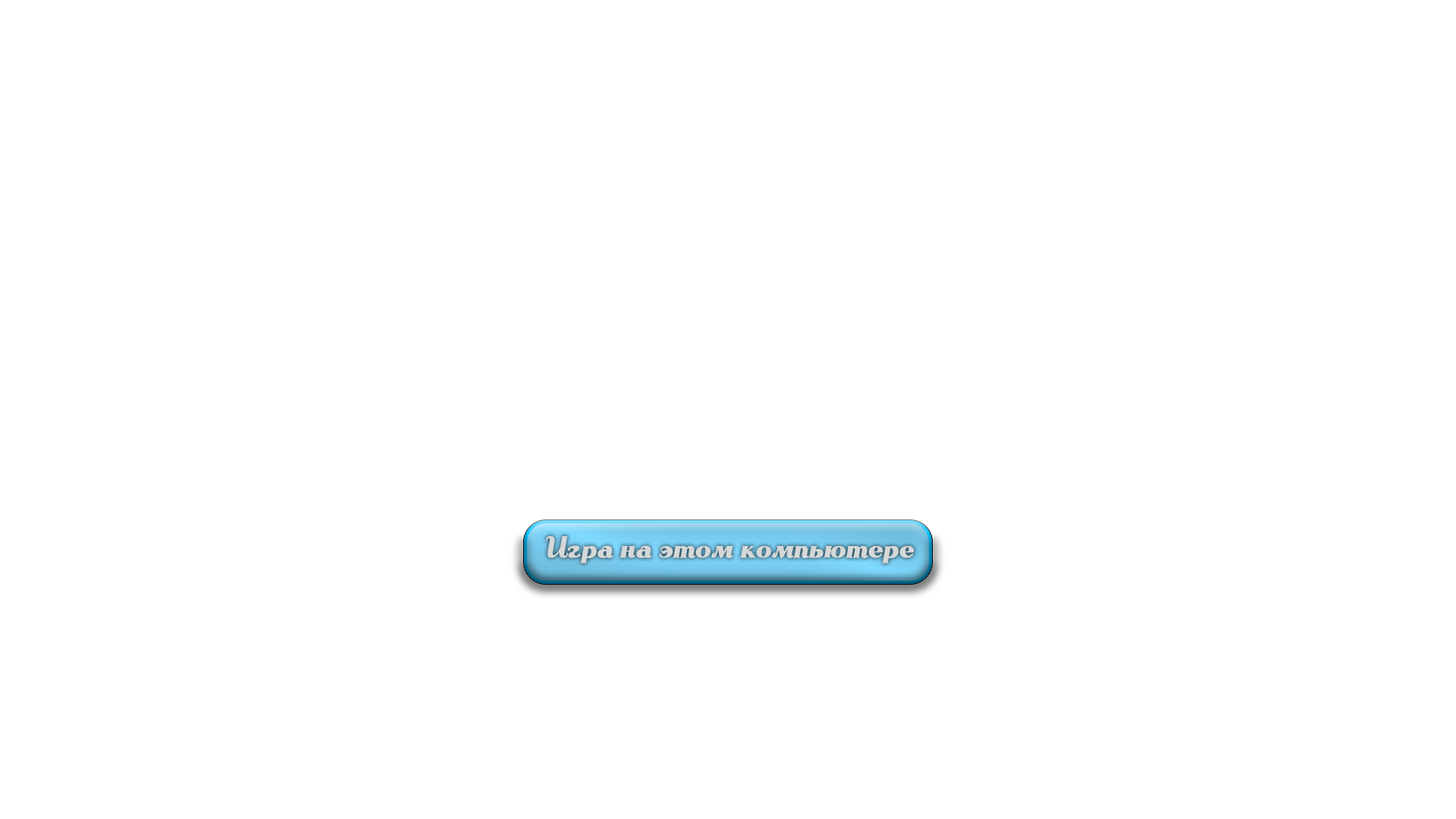
<style>
.page{position:relative;width:1456px;height:819px;background:#ffffff}
.page>*{position:absolute;margin:0}
.t1{font:30.3px "RhythmandJazz";color:#d5d8d8;font-weight:bold}
</style>
<div class="page">
<p class="t1" style="left:546px;top:536px;width:369px;height:27px">Игра на этом компьютере</p>
</div>
